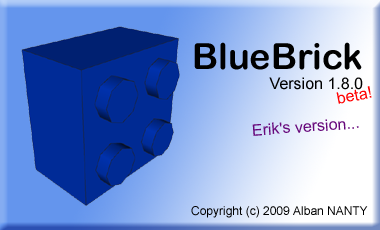
<style>
.page{position:relative;width:380px;height:230px}
.page>*{position:absolute;margin:0}
.t1{font:36px "ArialRoundedMTBold";color:#000000}
.t2{font:16px "ArialMT";color:#000000}
.t3{font:16px "ArialMT";color:#ff0000}
.t4{font:16px "ArialMT";color:#67087b}
.t5{font:12px "ArialMT";color:#000000}
</style>
<div class="page">
<p class="t1" style="left:194px;top:42px;width:168px;height:28px">BlueBrick</p>
<p class="t2" style="left:269px;top:77px;width:94px;height:13px">Version 1.8.0</p>
<p class="t3" style="left:336px;top:86px;width:36px;height:18px;rotate:-11deg">beta!</p>
<p class="t4" style="left:252px;top:119px;width:107px;height:17px;rotate:-4deg">Erik's version...</p>
<p class="t5" style="left:191px;top:206px;width:177px;height:12px">Copyright (c) 2009 Alban NANTY</p>
</div>
